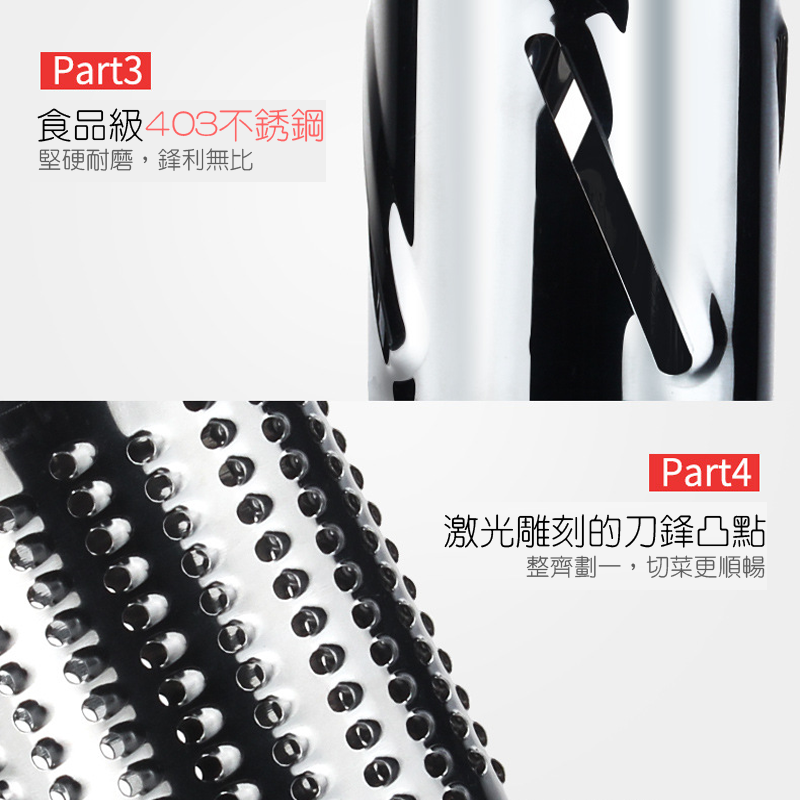
<style>
.page{position:relative;width:800px;height:800px}
.page>*{position:absolute;margin:0}
.t1{font:36px "HanWangYenLight";color:#fe6363}
.t2{font:36px "HanWangYenLight";color:#000000}
.t3{font:24px "HanWangYenLight";color:#5c5c5c}
</style>
<div class="page">
<p class="t1" style="left:37px;top:108px;width:287px;height:34px"><span class="t2">食品級</span>403不銹鋼</p>
<p class="t3" style="left:38px;top:148px;width:215px;height:23px">堅硬耐磨，鋒利無比</p>
<p class="t2" style="left:444px;top:514px;width:322px;height:34px">激光雕刻的刀鋒凸點</p>
<p class="t3" style="left:526px;top:555px;width:239px;height:23px">整齊劃一，切菜更順暢</p>
</div>
